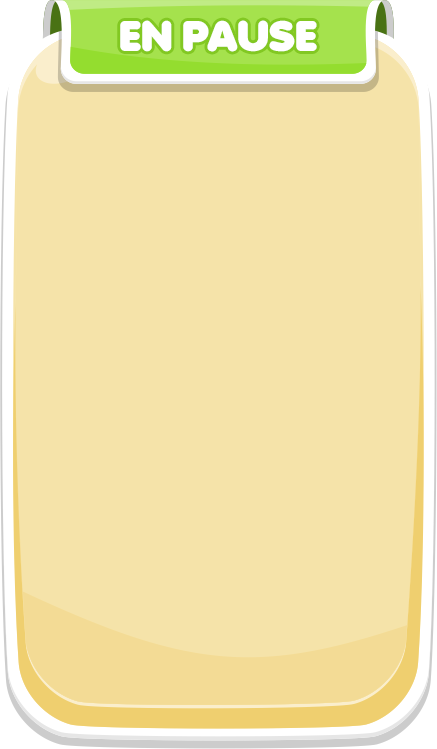
<style>
.page{position:relative;width:437px;height:749px;background:#f5e3a9}
.page>*{position:absolute;margin:0}
.t1{font:41.7px "Debussy";color:#ffffff}
</style>
<div class="page">
<p class="t1" style="left:120px;top:20px;width:197px;height:32px">EN  PAUSE</p>
</div>
